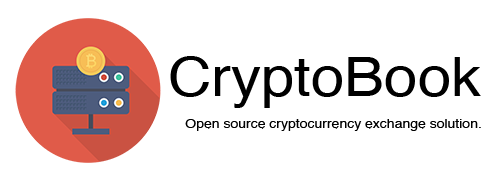
<style>
.page{position:relative;width:492px;height:187px;background:#ffffff}
.page>*{position:absolute;margin:0}
.t1{font:54.6px "Helvetica";color:#000000;scale:1.1 1}
.t2{font:12.7px "Helvetica";color:#000000;scale:1.1 1}
</style>
<div class="page">
<p class="t1" style="left:170px;top:56px;width:311px;height:52px">CryptoBook</p>
<p class="t2" style="left:185px;top:119px;width:296px;height:12px">Open source cryptocurrency exchange solution.</p>
</div>
